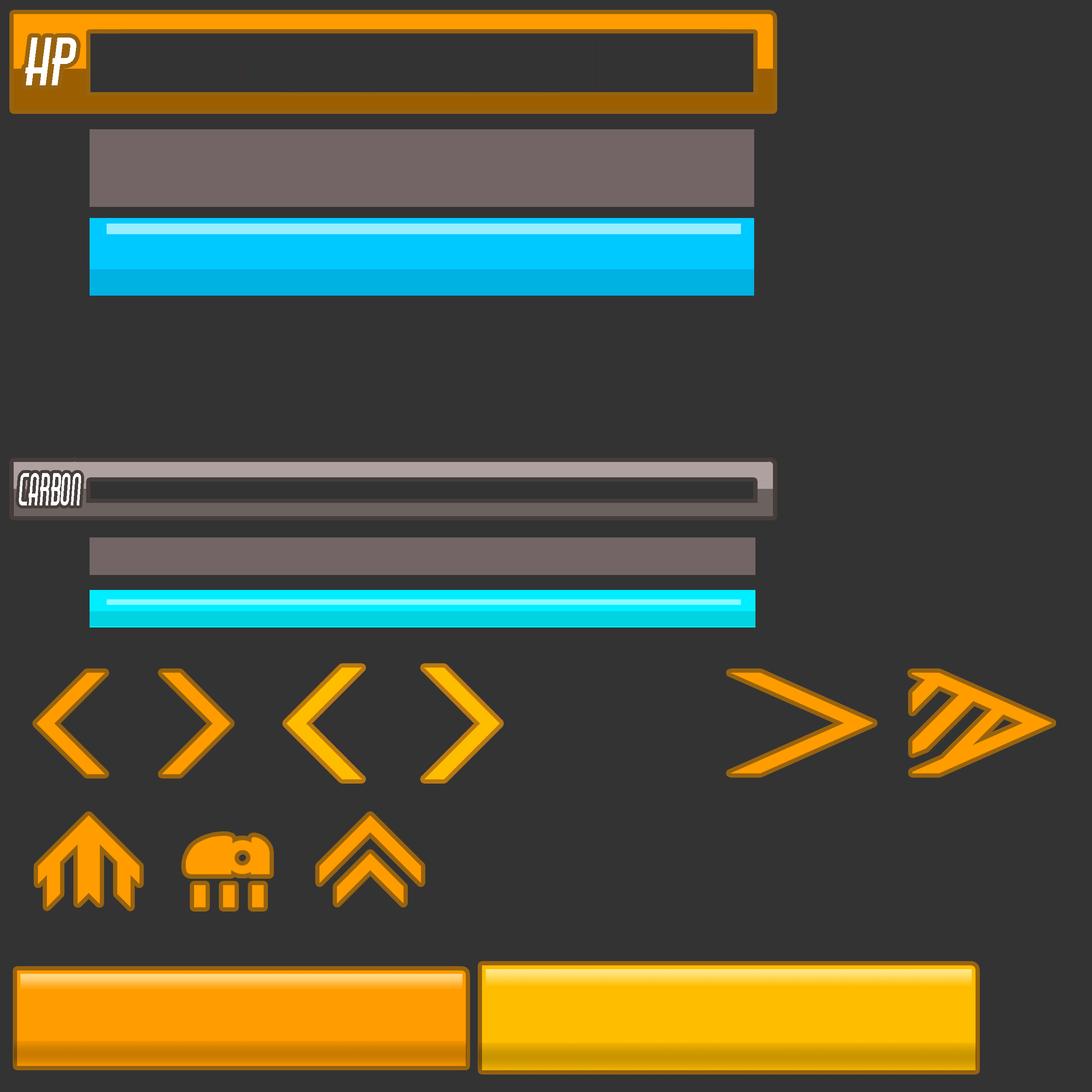
<style>
.page{position:relative;width:1092px;height:1092px;background:#333333}
.page>*{position:absolute;margin:0}
.t1{font:59.6px "AirAmericana";color:#ffffff}
.t2{font:40.5px "AirAmericana";color:#ffffff;scale:0.62 1}
</style>
<div class="page">
<p class="t1" style="left:25px;top:38px;width:51px;height:47px">HP</p>
<p class="t2" style="left:19px;top:473px;width:62px;height:32px">CARBON</p>
</div>
